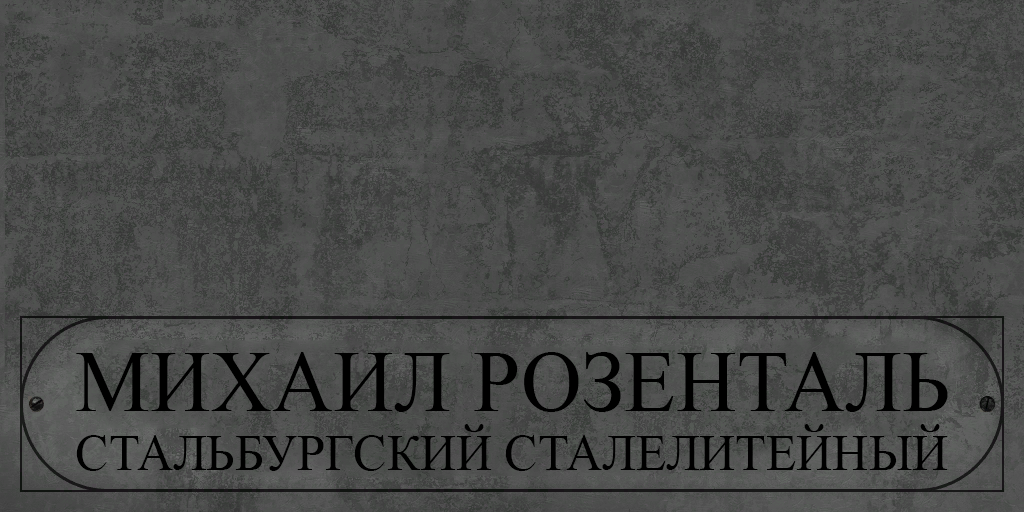
<style>
.page{position:relative;width:1024px;height:512px}
.page>*{position:absolute;margin:0}
.t1{font:88px "TimesNewRomanPSMT";color:#000000;text-transform:uppercase;scale:0.96 1}
.t2{font:52px "TimesNewRomanPSMT";color:#000000;text-transform:uppercase;scale:0.96 1}
</style>
<div class="page">
<p class="t1" style="left:76px;top:352px;width:872px;height:60px">Михаил Розенталь</p>
<p class="t2" style="left:76px;top:424px;width:872px;height:47px">Стальбургский сталелитейный</p>
</div>
